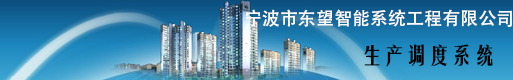
<style>
.page{position:relative;width:513px;height:80px}
.page>*{position:absolute;margin:0}
.t1{font:18px "AdobeHeitiStd-Regular";color:#fefbfb}
.t2{font:22px "FZYTK--GBK1-0";color:#030303;font-weight:bold}
</style>
<div class="page">
<p class="t1" style="left:246px;top:9px;width:266px;height:18px">宁波市东望智能系统工程有限公司</p>
<p class="t2" style="left:364px;top:44px;width:129px;height:23px">生产调度系统</p>
</div>
